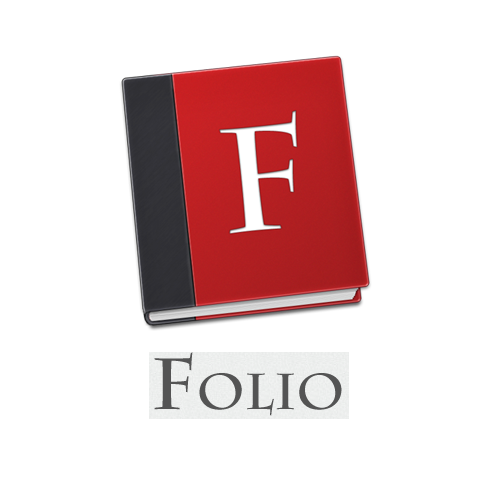
<style>
.page{position:relative;width:500px;height:500px;background:#ffffff}
.page>*{position:absolute;margin:0}
.t1{font:72px "CharlemagneStd-Bold";color:#545454;font-variant:small-caps}
</style>
<div class="page">
<p class="t1" style="left:154px;top:352px;width:188px;height:64px">Folio</p>
</div>
